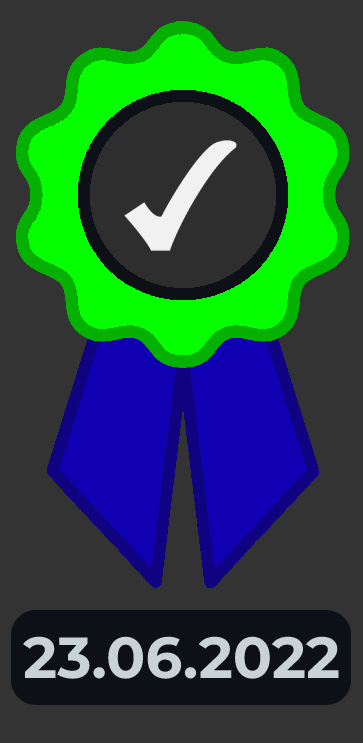
<style>
.page{position:relative;width:363px;height:743px;background:#333333}
.page>*{position:absolute;margin:0}
.t1{font:58px "Montserrat-Bold";color:#c9d1d9}
</style>
<div class="page">
<p class="t1" style="left:23px;top:636px;width:316px;height:43px">23.06.2022</p>
</div>
